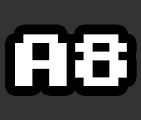
<style>
.page{position:relative;width:141px;height:120px;background:#333333}
.page>*{position:absolute;margin:0}
.t1{font:68.7px "6x6-Pixel-Font";color:#ffffff}
</style>
<div class="page">
<p class="t1" style="left:15px;top:34px;width:112px;height:52px">A8</p>
</div>
